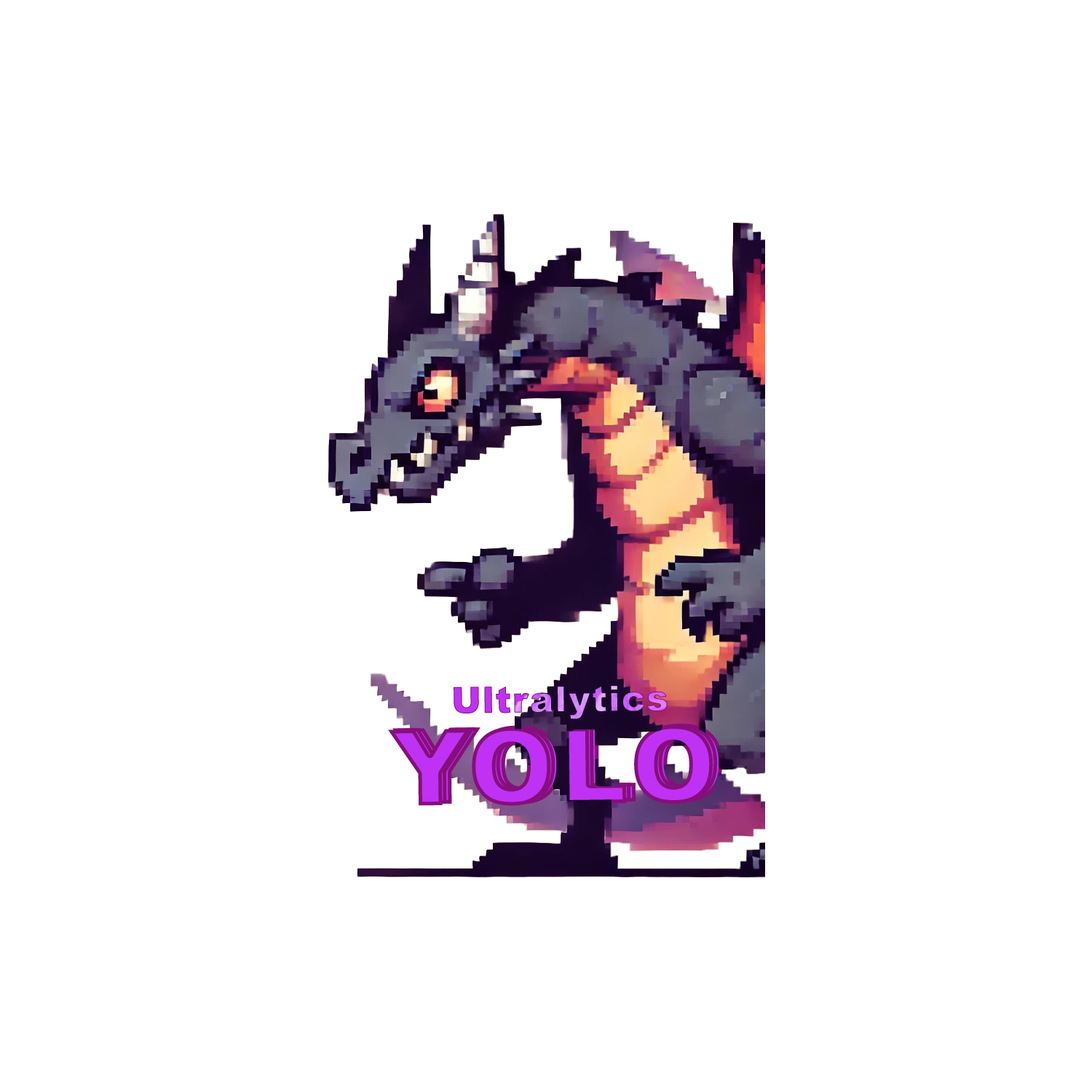
<style>
.page{position:relative;width:1092px;height:1092px;background:#ffffff}
.page>*{position:absolute;margin:0}
.t1{font:36.2px "Arial-Black";letter-spacing:0.025em}
.t2{font:105.8px "Arial-Black";letter-spacing:0.025em;color:#bf32f3}
.t3{font:105.8px "Arial-Black";letter-spacing:0.025em}
</style>
<div class="page">
<p class="t1" style="left:454px;top:685px;width:214px;height:35px;rotate:-1deg">Ultralytics</p>
<p class="t2" style="left:388px;top:725px;width:325px;height:81px;rotate:-1deg">YOLO</p>
<p class="t2" style="left:392px;top:724px;width:326px;height:80px;rotate:-1deg">YOLO</p>
<p class="t3" style="left:397px;top:724px;width:326px;height:80px;rotate:-1deg">YOLO</p>
</div>
